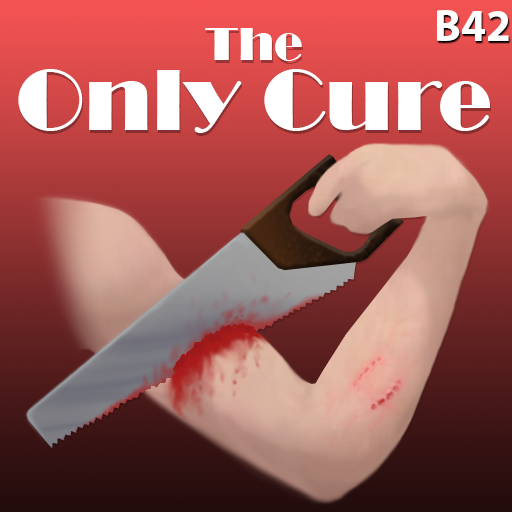
<style>
.page{position:relative;width:512px;height:512px}
.page>*{position:absolute;margin:0}
.t1{font:45px "MyriadPro-Bold";color:#ffffff}
.t2{font:90px/70px "Broadway";color:#ffffff}
.t3{font:48px/70px "Broadway";color:#ffffff}
</style>
<div class="page">
<p class="t1" style="left:437px;top:10px;width:72px;height:31px">B42</p>
<p class="t2" style="left:18px;top:28px;width:473px;height:105px;text-align:center"><span class="t3">The<br></span>Only Cure</p>
</div>
